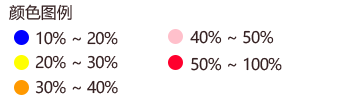
<style>
.page{position:relative;width:360px;height:101px;background:#ffffff}
.page>*{position:absolute;margin:0}
.t1{font:15.9px "MicrosoftYaHeiUI";color:#352122}
</style>
<div class="page">
<p class="t1" style="left:9px;top:4px;width:63px;height:17px">颜色图例</p>
<p class="t1" style="left:190px;top:30px;width:84px;height:14px">40% ~ 50%</p>
<p class="t1" style="left:36px;top:31px;width:82px;height:14px">10% ~ 20%</p>
<p class="t1" style="left:35px;top:55px;width:83px;height:14px">20% ~ 30%</p>
<p class="t1" style="left:191px;top:57px;width:91px;height:14px">50% ~ 100%</p>
<p class="t1" style="left:35px;top:80px;width:83px;height:14px">30% ~ 40%</p>
</div>
